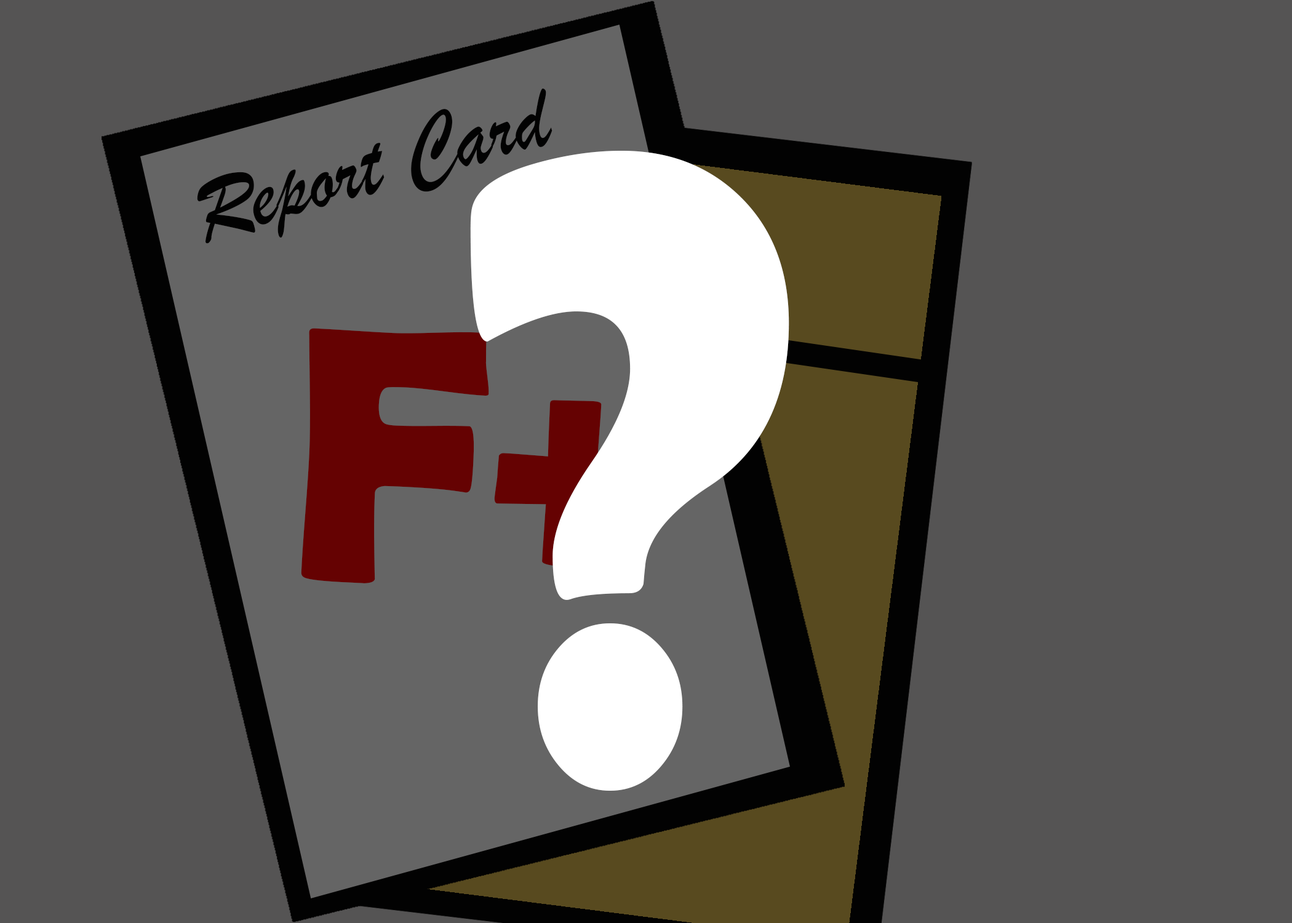
<style>
.page{position:relative;width:1292px;height:923px;background:#555454}
.page>*{position:absolute;margin:0}
.t1{font:93.9px "BrushScriptMT";color:#000000;scale:0.93 1}
.t2{font:913.4px "BerlinSansFBDemi-Bold";color:#ffffff;scale:0.88 1}
.t3{font:365.8px "BerlinSansFBDemi-Bold";color:#650202}
</style>
<div class="page">
<p class="t1" style="left:197px;top:88px;width:356px;height:156px;rotate:-16deg">Report Card</p>
<p class="t2" style="left:470px;top:151px;width:319px;height:640px">?</p>
<p class="t3" style="left:301px;top:328px;width:351px;height:255px;rotate:3deg">F+</p>
</div>
